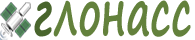
<style>
.page{position:relative;width:195px;height:40px;background:#ffffff}
.page>*{position:absolute;margin:0}
.t1{font:62.9px "SegoePrint-Bold";color:#63813c;scale:0.66 1}
.t2{font:62.9px "SegoePrint-Bold";color:#49652d;scale:0.66 1}
</style>
<div class="page">
<p class="t1" style="left:34px;top:0px;width:157px;height:37px"><span class="t2">г</span>лонасс</p>
</div>
